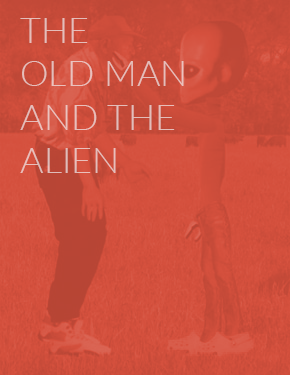
<style>
.page{position:relative;width:290px;height:375px}
.page>*{position:absolute;margin:0}
.t1{font:36px "Lato-Light";color:#e5beba}
</style>
<div class="page">
<p class="t1" style="left:20px;top:18px;width:164px;height:155px">THE<br>OLD MAN<br>AND THE<br>ALIEN</p>
</div>
